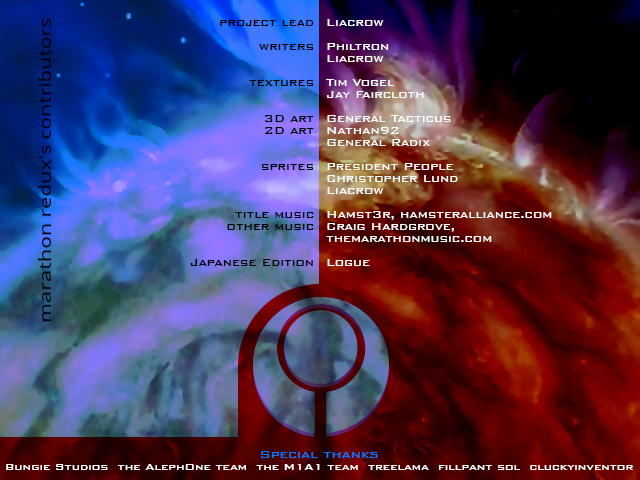
<style>
.page{position:relative;width:640px;height:480px}
.page>*{position:absolute;margin:0}
.t1{font:13px/12px "BankGothicBT-Medium";color:#000000}
.t2{font:13px/12px "BankGothicBT-Medium";color:#ffffff}
.t3{font:12px/12px "BankGothicBT-Medium";color:#ffffff}
.t4{font:14px/12px "BankGothicBT-Medium";color:#0077ff}
</style>
<div class="page">
<p class="t1" style="left:190px;top:20px;width:124px;height:246px;text-align:right">project lead<br><br>writers<br><br><br>textures<br><br><br>3D art<br>2D art<br><br><br>sprites<br><br><br><br>title music<br>other music<br><br><br>Japanese Edition</p>
<p class="t2" style="left:326px;top:19px;width:226px;height:247px">Liacrow<br><br>Philtron<br>Liacrow<br><br>Tim Vogel<br>Jay Faircloth<br><br>General Tacticus<br>Nathan92<br>General Radix<br><br>President People<br>Christopher Lund<br>Liacrow<br><br>Hamst3r, hamsteralliance.com<br>Craig Hardgrove, themarathonmusic.com<br><br>Logue</p>
<p class="t3" style="left:6px;top:451px;width:628px;height:19px;text-align:center"><span class="t4">Special thanks<br></span>Bungie Studios  the AlephOne team  the M1A1 team  treelama  fillpant sol  cluckyinventor</p>
</div>
